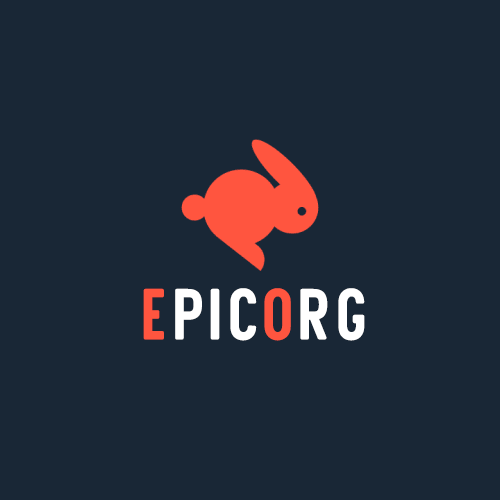
<style>
.page{position:relative;width:500px;height:500px;background:#192736}
.page>*{position:absolute;margin:0}
.t1{font:72px "ShaimusClean-Regular";letter-spacing:0.02em;color:#ffffff;text-transform:uppercase}
.t2{font:72px "ShaimusClean-Regular";letter-spacing:0.02em;color:#ff553f;text-transform:uppercase}
</style>
<div class="page">
<p class="t1" style="left:143px;top:288px;width:222px;height:53px"><span class="t2">E</span>PIC<span class="t2">O</span>RG</p>
</div>
